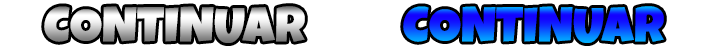
<style>
.page{position:relative;width:720px;height:50px;background:#ffffff}
.page>*{position:absolute;margin:0}
.t1{font:50px "LuckiestGuy-Regular"}
</style>
<div class="page">
<p class="t1" style="left:44px;top:6px;width:261px;height:37px">CONTINUAR</p>
<p class="t1" style="left:403px;top:6px;width:261px;height:37px">CONTINUAR</p>
</div>
